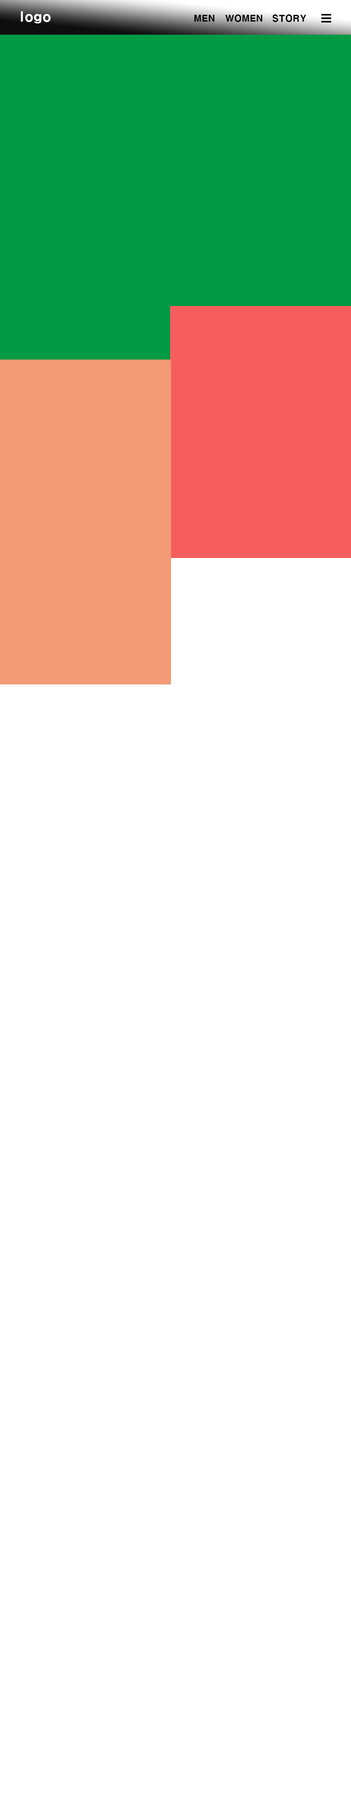
<style>
.page{position:relative;width:351px;height:1800px;background:#ffffff}
.page>*{position:absolute;margin:0}
.t1{font:13.5px "H2gtrE";color:#ffffff}
.t2{font:9px "H2gtrE";color:#000000}
</style>
<div class="page">
<p class="t1" style="left:21px;top:11px;width:30px;height:12px">logo</p>
<p class="t2" style="left:194px;top:14px;width:21px;height:8px">MEN</p>
<p class="t2" style="left:225px;top:14px;width:37px;height:8px">WOMEN</p>
<p class="t2" style="left:272px;top:14px;width:34px;height:8px">STORY</p>
</div>
